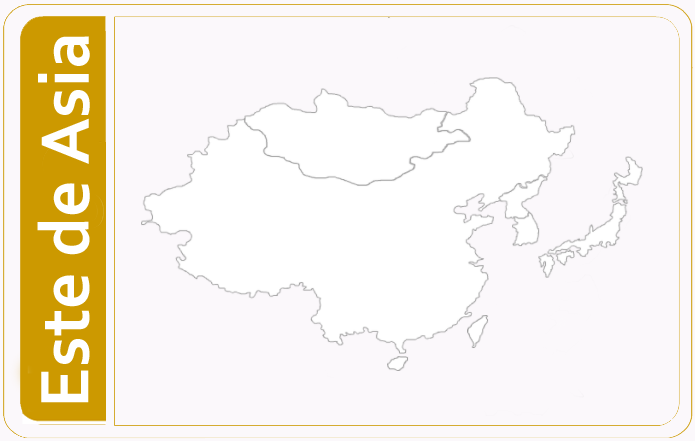
<style>
.page{position:relative;width:695px;height:441px;background:#fbf8fb}
.page>*{position:absolute;margin:0}
.t1{font:72px "Corbel-Bold";color:#ffffff}
</style>
<div class="page">
<p class="t1" style="left:37px;top:36px;width:53px;height:367px;rotate:-90deg">Este de Asia</p>
</div>
